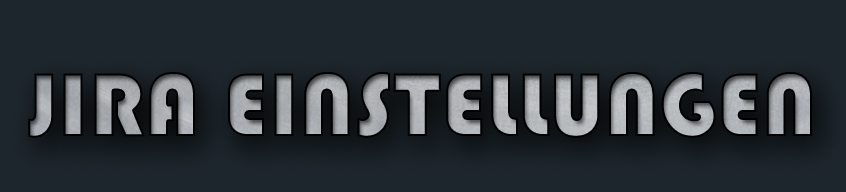
<style>
.page{position:relative;width:846px;height:192px;background:#1d262c}
.page>*{position:absolute;margin:0}
.t1{font:93.6px "Bauhaus93";text-transform:uppercase}
</style>
<div class="page">
<p class="t1" style="left:28px;top:72px;width:784px;height:66px">Jira Einstellungen</p>
</div>
